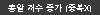
<style>
.page{position:relative;width:100px;height:15px;background:#3a3a3a}
.page>*{position:absolute;margin:0}
.t1{font:8px "MalgunGothicBold";color:#ffffff}
</style>
<div class="page">
<p class="t1" style="left:8px;top:4px;width:83px;height:8px">총알 개수 증가 (중복X)</p>
</div>
